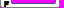
<style>
.page{position:relative;width:64px;height:8px;background:#ffffff}
.page>*{position:absolute;margin:0}
.t1{font:7.7px "Arial-Black";letter-spacing:-0.01em;color:#101010;scale:1.18 1}
</style>
<div class="page">
<p class="t1" style="left:4px;top:1px;width:6px;height:6px">F</p>
</div>
